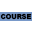
<style>
.page{position:relative;width:32px;height:32px;background:#ffffff}
.page>*{position:absolute;margin:0}
.t1{font:7px "Arial-Black";color:#000000;scale:0.93 1}
</style>
<div class="page">
<p class="t1" style="left:0px;top:13px;width:32px;height:7px">COURSE</p>
</div>
